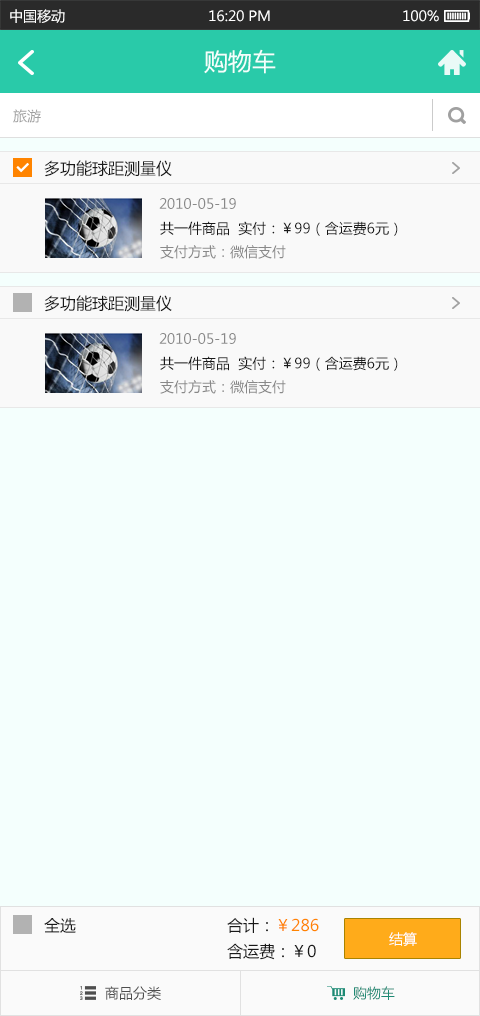
<style>
.page{position:relative;width:480px;height:1016px;background:#f4fffd}
.page>*{position:absolute;margin:0}
.t1{font:14px "MicrosoftYaHei";color:#ffffff}
.t2{font:24px "MicrosoftYaHei";color:#f4fffd}
.t3{font:14px "MicrosoftYaHei";color:#a0a0a0}
.t4{font:16px "MicrosoftYaHei";color:#191919}
.t5{font:14px "MicrosoftYaHei";color:#898989}
.t6{font:14px "MicrosoftYaHei";color:#191919}
.t7{font:16px/26px "MicrosoftYaHei";color:#191919}
.t8{font:16px/26px "MicrosoftYaHei";color:#ff8400}
.t9{font:14px "MicrosoftYaHei";color:#4e4e4e}
.t10{font:14px "MicrosoftYaHei";color:#1d8a74}
</style>
<div class="page">
<p class="t1" style="left:10px;top:9px;width:55px;height:14px">中国移动</p>
<p class="t1" style="left:209px;top:10px;width:61px;height:12px">16:20 PM</p>
<p class="t1" style="left:403px;top:10px;width:36px;height:12px">100%</p>
<p class="t2" style="left:204px;top:49px;width:72px;height:25px">购物车</p>
<p class="t3" style="left:13px;top:109px;width:28px;height:14px">旅游</p>
<p class="t4" style="left:44px;top:160px;width:128px;height:17px">多功能球距测量仪</p>
<p class="t5" style="left:159px;top:198px;width:77px;height:11px">2010-05-19</p>
<p class="t6" style="left:160px;top:221px;width:238px;height:15px">共一件商品  实付：￥99（含运费6元）</p>
<p class="t5" style="left:160px;top:245px;width:126px;height:14px">支付方式：微信支付</p>
<p class="t4" style="left:44px;top:295px;width:128px;height:17px">多功能球距测量仪</p>
<p class="t5" style="left:159px;top:333px;width:77px;height:11px">2010-05-19</p>
<p class="t6" style="left:160px;top:356px;width:238px;height:15px">共一件商品  实付：￥99（含运费6元）</p>
<p class="t5" style="left:160px;top:380px;width:126px;height:14px">支付方式：微信支付</p>
<p class="t4" style="left:44px;top:918px;width:32px;height:15px">全选</p>
<p class="t7" style="left:227px;top:917px;width:92px;height:43px">合计：<span class="t8">￥286<br></span>含运费：￥0</p>
<p class="t1" style="left:389px;top:932px;width:28px;height:14px">结算</p>
<p class="t9" style="left:105px;top:986px;width:56px;height:14px">商品分类</p>
<p class="t10" style="left:353px;top:986px;width:42px;height:14px">购物车</p>
</div>
